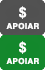
<style>
.page{position:relative;width:45px;height:70px;background:#515151}
.page>*{position:absolute;margin:0}
.t1{font:14px "Helvetica-Bold";letter-spacing:0.025em;color:#ffffff}
.t2{font:8px "Helvetica-Bold";letter-spacing:0.025em;color:#ffffff}
</style>
<div class="page">
<p class="t1" style="left:19px;top:6px;width:8px;height:13px">$</p>
<p class="t2" style="left:6px;top:22px;width:33px;height:8px">APOIAR</p>
<p class="t1" style="left:19px;top:41px;width:8px;height:13px">$</p>
<p class="t2" style="left:6px;top:57px;width:33px;height:8px">APOIAR</p>
</div>
